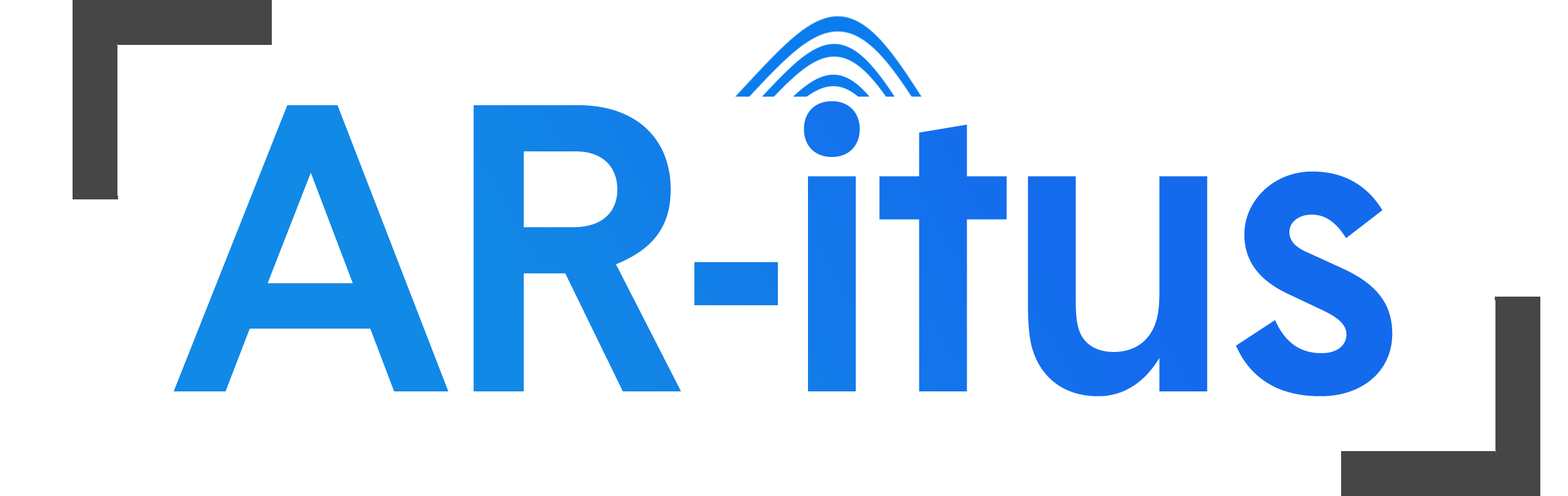
<style>
.page{position:relative;width:1568px;height:496px;background:#ffffff}
.page>*{position:absolute;margin:0}
.t1{font:397.1px "Basetica-Med";color:#127ce9}
</style>
<div class="page">
<p class="t1" style="left:173px;top:101px;width:1220px;height:295px">AR-itus</p>
</div>
